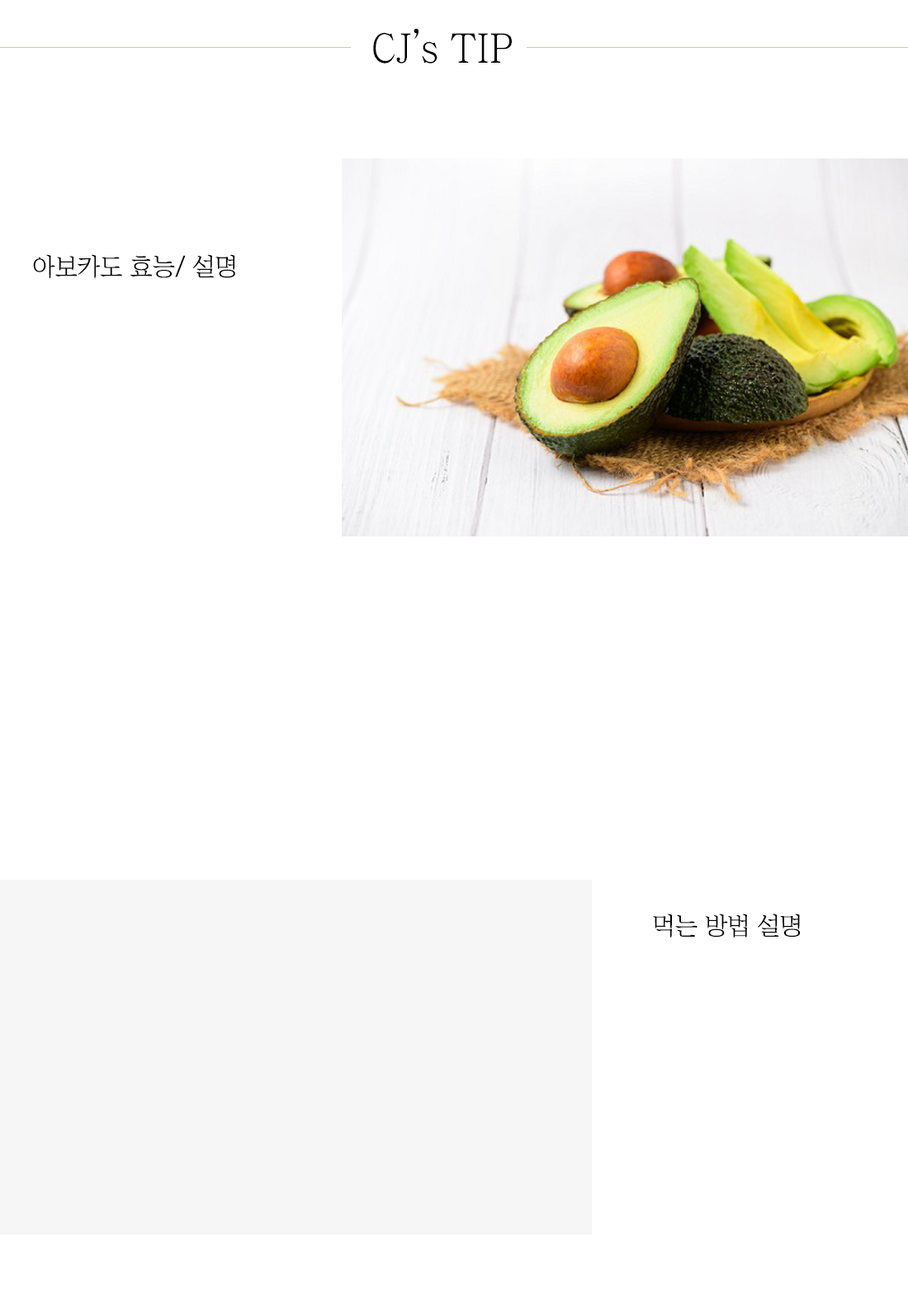
<style>
.page{position:relative;width:908px;height:1313px;background:#ffffff}
.page>*{position:absolute;margin:0}
.t1{font:41.3px "ChosunilboNM";color:#000000}
.t2{font:24.8px "ChosunilboNM";color:#000000}
</style>
<div class="page">
<p class="t1" style="left:373px;top:28px;width:139px;height:36px">CJ’s TIP</p>
<p class="t2" style="left:33px;top:254px;width:202px;height:25px">아보카도 효능/ 설명</p>
<p class="t2" style="left:653px;top:914px;width:148px;height:24px">먹는 방법 설명</p>
</div>
